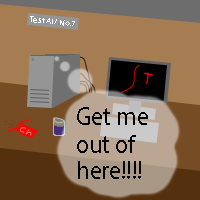
<style>
.page{position:relative;width:200px;height:200px;background:#a67c52}
.page>*{position:absolute;margin:0}
.t1{font:25.4px "MyriadPro-Regular";color:#010101;scale:0.96 1}
</style>
<div class="page">
<p class="t1" style="left:77px;top:107px;width:71px;height:72px">Get me <br><br>out of <br>here!!!!</p>
</div>
